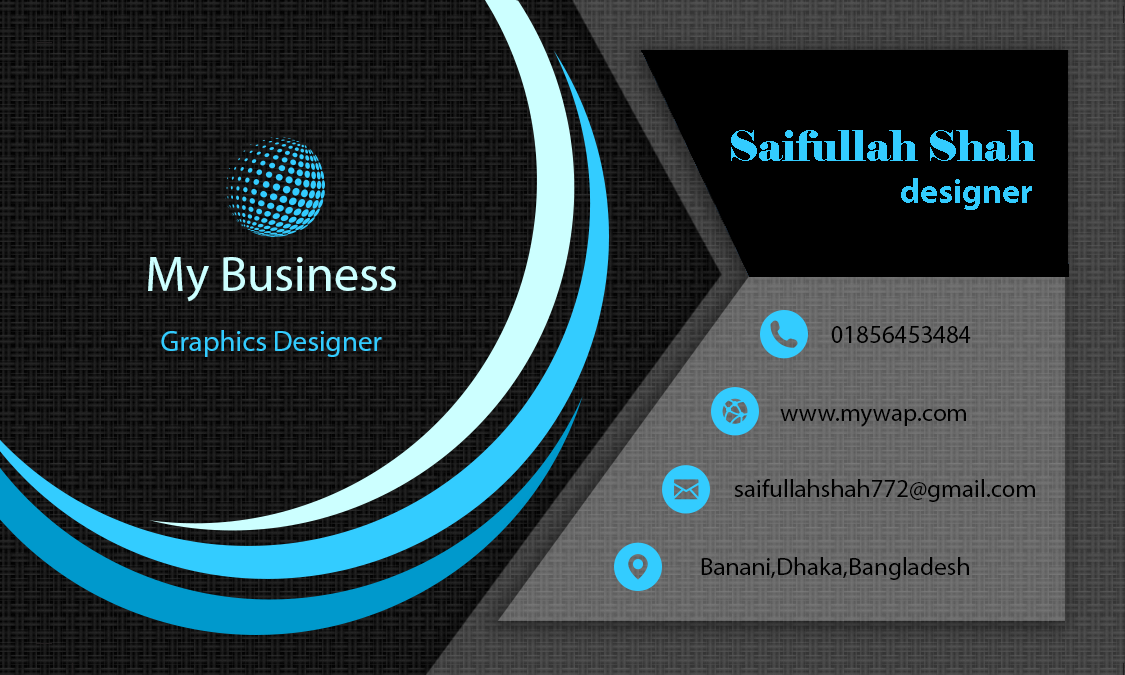
<style>
.page{position:relative;width:1125px;height:675px}
.page>*{position:absolute;margin:0}
.t1{font:41.7px "Elephant-Regular";color:#33ccff}
.t2{font:34.6px "MyriadPro-Bold";color:#33ccff}
.t3{font:50px "MyriadPro-Regular";color:#ccffff}
.t4{font:25px "MyriadPro-Regular";color:#000000}
.t5{font:29.2px "MyriadPro-Regular";color:#33ccff}
</style>
<div class="page">
<p class="t1" style="left:731px;top:130px;width:304px;height:31px">Saifullah Shah</p>
<p class="t2" style="left:901px;top:178px;width:131px;height:32px">designer</p>
<p class="t3" style="left:148px;top:257px;width:248px;height:45px">My Business</p>
<p class="t4" style="left:831px;top:326px;width:140px;height:17px">01856453484</p>
<p class="t5" style="left:161px;top:330px;width:221px;height:27px">Graphics Designer</p>
<p class="t4" style="left:780px;top:409px;width:186px;height:18px">www.mywap.com</p>
<p class="t4" style="left:734px;top:479px;width:301px;height:23px">saifullahshah772@gmail.com</p>
<p class="t4" style="left:701px;top:557px;width:268px;height:23px">Banani,Dhaka,Bangladesh</p>
</div>
